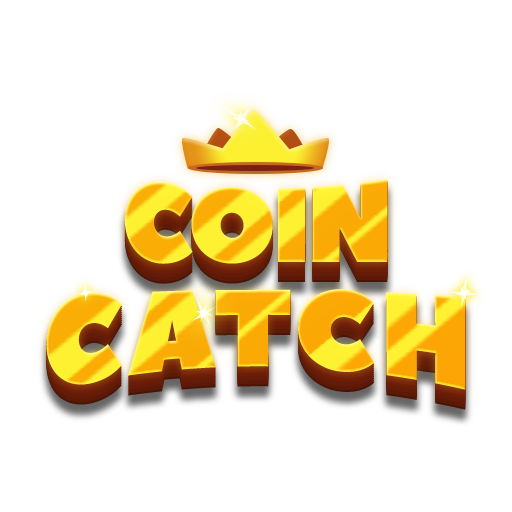
<style>
.page{position:relative;width:512px;height:512px;background:#ffffff}
.page>*{position:absolute;margin:0}
.t1{font:119.8px "PeaceSans";letter-spacing:-0.05em;scale:0.87 1}
.t2{font:134.2px "PeaceSans";letter-spacing:0.025em;scale:0.87 1}
</style>
<div class="page">
<p class="t1" style="left:124px;top:179px;width:264px;height:85px">COIN</p>
<p class="t2" style="left:46px;top:289px;width:420px;height:101px">CATCH</p>
</div>
